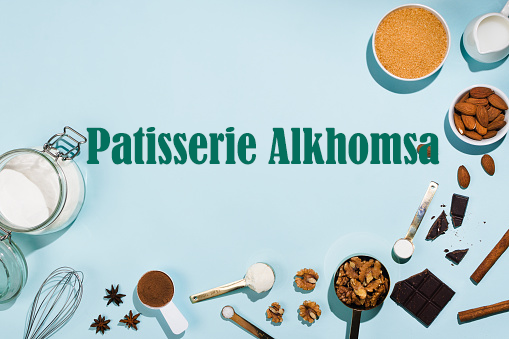
<style>
.page{position:relative;width:509px;height:339px}
.page>*{position:absolute;margin:0}
.t1{font:45.8px "BernardMT-Condensed";color:#03705d}
</style>
<div class="page">
<p class="t1" style="left:86px;top:127px;width:354px;height:38px">Patisserie Alkhomsa</p>
</div>
